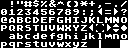
<style>
.page{position:relative;width:128px;height:48px;background:#000000}
.page>*{position:absolute;margin:0}
.t1{font:8px "AtariClassicChunky";color:#ffffff}
.t2{font:8px/8px "AtariClassicChunky";color:#ffffff}
</style>
<div class="page">
<p class="t1" style="left:11px;top:0px;width:116px;height:8px">! #$%&amp;^()*+,-./</p>
<p class="t1" style="left:1px;top:17px;width:126px;height:6px">@ABCDEFGHIJKLMNO</p>
<p class="t1" style="left:1px;top:8px;width:126px;height:8px">0123456789:;&lt;=&gt;?</p>
<p class="t1" style="left:1px;top:25px;width:127px;height:6px">PQRSTUVWXYZ[\]^_</p>
<p class="t2" style="left:1px;top:33px;width:126px;height:15px">abcdefghijklmno<br>pqrstuvwxyz |</p>
</div>
